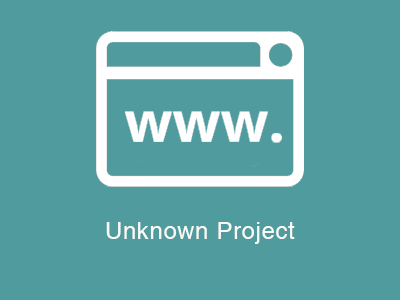
<style>
.page{position:relative;width:400px;height:300px;background:#509b9e}
.page>*{position:absolute;margin:0}
.t1{font:24px "Helvetica";letter-spacing:0.025em;color:#fafaf7}
</style>
<div class="page">
<p class="t1" style="left:106px;top:222px;width:189px;height:22px">Unknown Project</p>
</div>
